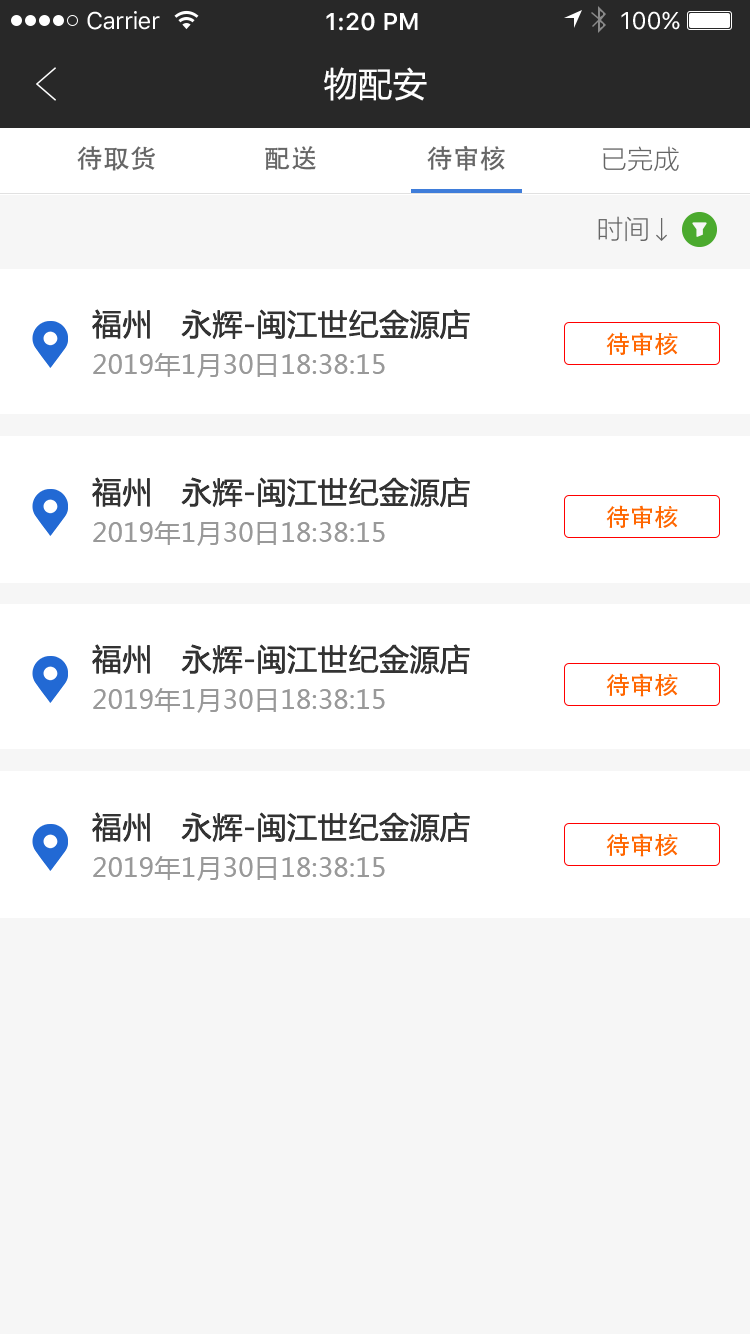
<style>
.page{position:relative;width:750px;height:1334px;background:#ffffff}
.page>*{position:absolute;margin:0}
.t1{font:24px "SFUIText-Regular";letter-spacing:-0.025em;color:#ffffff}
.t2{font:24px "SFUIText-Semibold";color:#ffffff}
.t3{font:24px "SFUIText-Regular";color:#ffffff}
.t4{font:34px "MicrosoftYaHei";letter-spacing:0.02em;color:#ffffff}
.t5{font:26px "AdobeHeitiStd-Regular";letter-spacing:0.02em;color:#666666}
.t6{font:26px "MicrosoftYaHeiLight";letter-spacing:0.02em;color:#666666}
.t7{font:30px "MicrosoftYaHei";letter-spacing:0.02em;color:#333333}
.t8{font:24px "AdobeHeitiStd-Regular";letter-spacing:0.02em;color:#ff6600}
.t9{font:26px "MicrosoftYaHei";letter-spacing:0.02em;color:#999999}
</style>
<div class="page">
<p class="t1" style="left:87px;top:11px;width:73px;height:19px">Carrier</p>
<p class="t2" style="left:326px;top:12px;width:92px;height:19px">1:20 PM</p>
<p class="t3" style="left:621px;top:11px;width:59px;height:19px">100%</p>
<p class="t4" style="left:324px;top:67px;width:103px;height:34px">物配安</p>
<p class="t5" style="left:77px;top:146px;width:78px;height:25px">待取货</p>
<p class="t5" style="left:265px;top:146px;width:51px;height:24px">配送</p>
<p class="t5" style="left:427px;top:145px;width:78px;height:26px">待审核</p>
<p class="t6" style="left:603px;top:146px;width:76px;height:25px">已完成</p>
<p class="t6" style="left:598px;top:216px;width:50px;height:26px">时间</p>
<p class="t7" style="left:92px;top:309px;width:378px;height:31px">福州   永辉-闽江世纪金源店</p>
<p class="t8" style="left:606px;top:332px;width:72px;height:24px">待审核</p>
<p class="t9" style="left:93px;top:353px;width:292px;height:25px">2019年1月30日18:38:15</p>
<p class="t7" style="left:92px;top:477px;width:378px;height:31px">福州   永辉-闽江世纪金源店</p>
<p class="t8" style="left:606px;top:505px;width:72px;height:24px">待审核</p>
<p class="t9" style="left:93px;top:521px;width:292px;height:25px">2019年1月30日18:38:15</p>
<p class="t7" style="left:92px;top:644px;width:378px;height:31px">福州   永辉-闽江世纪金源店</p>
<p class="t8" style="left:606px;top:673px;width:72px;height:24px">待审核</p>
<p class="t9" style="left:93px;top:688px;width:292px;height:25px">2019年1月30日18:38:15</p>
<p class="t7" style="left:92px;top:812px;width:378px;height:31px">福州   永辉-闽江世纪金源店</p>
<p class="t8" style="left:606px;top:833px;width:72px;height:24px">待审核</p>
<p class="t9" style="left:93px;top:856px;width:292px;height:25px">2019年1月30日18:38:15</p>
</div>
